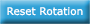
<style>
.page{position:relative;width:90px;height:24px}
.page>*{position:absolute;margin:0}
.t1{font:10.5px "Verdana";color:#ffffff}
</style>
<div class="page">
<p class="t1" style="left:7px;top:7px;width:76px;height:9px">Reset Rotation</p>
</div>
